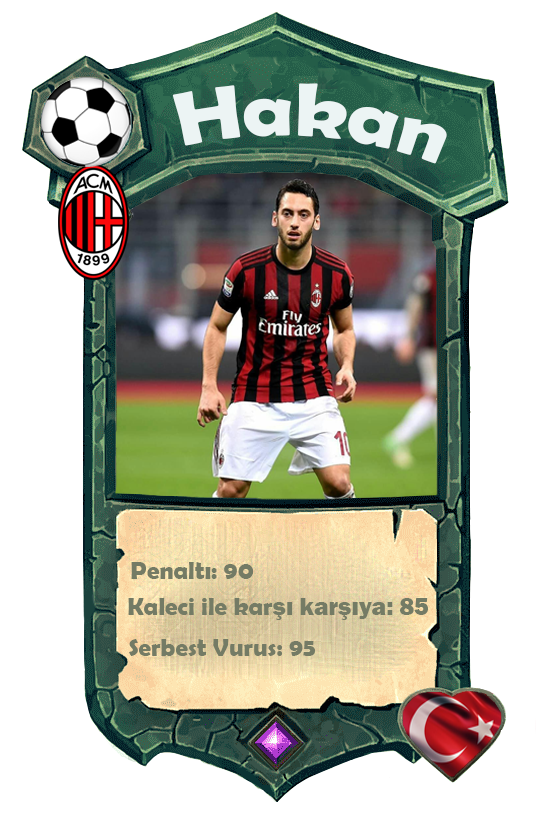
<style>
.page{position:relative;width:558px;height:814px;background:#ffffff}
.page>*{position:absolute;margin:0}
.t1{font:75.7px "BerlinSansFBDemi-Bold";color:#ecf4f4;scale:1.06 1}
.t2{font:25px "BerlinSansFBDemi-Bold";color:#747b65}
.t3{font:25px "FranklinGothic-Heavy";color:#747b65}
</style>
<div class="page">
<p class="t1" style="left:172px;top:83px;width:275px;height:81px;rotate:4deg">Hakan</p>
<p class="t2" style="left:131px;top:562px;width:123px;height:17px">Penaltı: 90</p>
<p class="t2" style="left:128px;top:598px;width:300px;height:22px">Kaleci ile kar<span class="t3">şı karşıya: 85</span></p>
<p class="t2" style="left:129px;top:639px;width:186px;height:17px">Serbest Vurus: 95</p>
</div>
